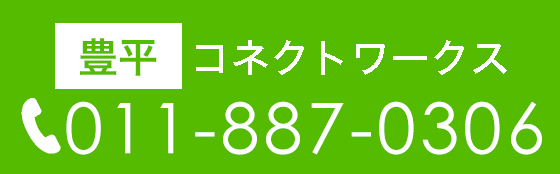
<style>
.page{position:relative;width:560px;height:174px;background:#55bb00}
.page>*{position:absolute;margin:0}
.t1{font:40px "HiraKakuStd-W6";color:#55bb00}
.t2{font:40px "HiraKakuStd-W5";color:#ffffff}
.t3{font:70px "CenturyGothic";letter-spacing:0.06em;color:#ffffff}
</style>
<div class="page">
<p class="t1" style="left:80px;top:38px;width:77px;height:38px">豊平</p>
<p class="t2" style="left:196px;top:40px;width:311px;height:35px">コネクトワークス</p>
<p class="t3" style="left:66px;top:101px;width:476px;height:54px">011-887-0306</p>
</div>
